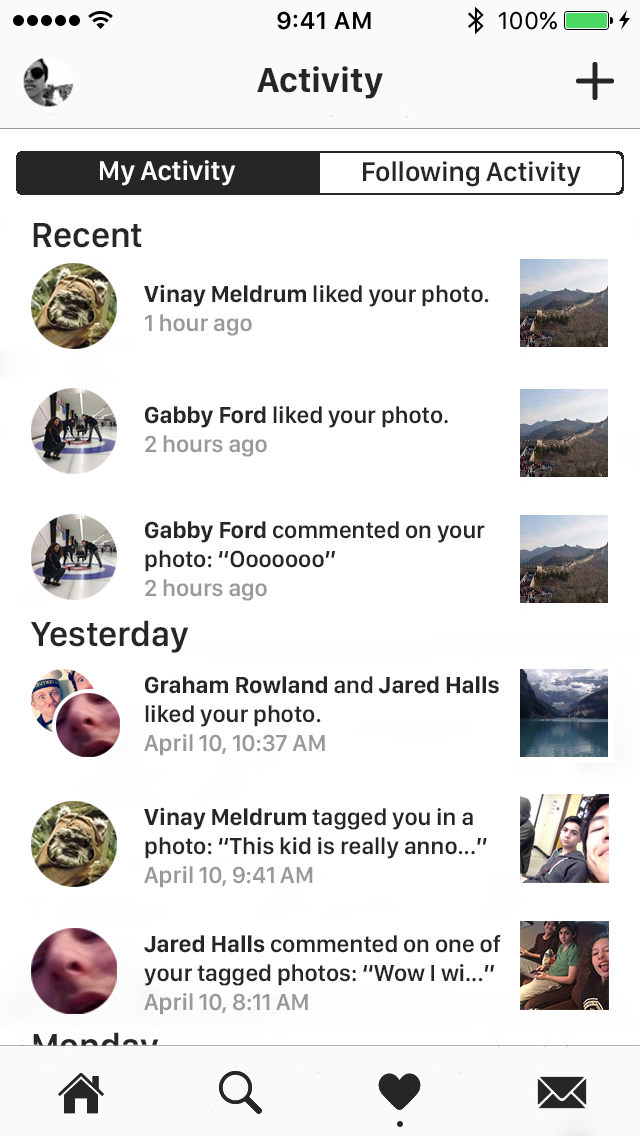
<style>
.page{position:relative;width:640px;height:1136px;background:#ffffff}
.page>*{position:absolute;margin:0}
.t1{font:36px "SanFranciscoDisplay-Bold";color:#262626}
.t2{font:28px "SanFranciscoDisplay-Semibold";color:#ffffff}
.t3{font:28px "SanFranciscoDisplay-Semibold";color:#262626}
.t4{font:36px "SanFranciscoDisplay-Semibold";color:#262626}
.t5{font:24px "SanFranciscoDisplay-Semibold";color:#262626}
.t6{font:24px "SanFranciscoDisplay-Bold";color:#262626}
.t7{font:24px "SanFranciscoDisplay-Semibold";color:#999999}
</style>
<div class="page">
<p class="t1" style="left:257px;top:66px;width:126px;height:33px">Activity</p>
<p class="t2" style="left:100px;top:160px;width:136px;height:26px">My Activity</p>
<p class="t3" style="left:363px;top:161px;width:218px;height:26px">Following Activity</p>
<p class="t4" style="left:33px;top:223px;width:109px;height:25px">Recent</p>
<p class="t5" style="left:144px;top:284px;width:345px;height:52px"><span class="t6">Vinay Meldrum</span> liked your photo.<br><span class="t7">1 hour ago</span></p>
<p class="t5" style="left:145px;top:406px;width:303px;height:51px"><span class="t6">Gabby Ford </span>liked your photo.<br><span class="t7">2 hours ago</span></p>
<p class="t5" style="left:145px;top:521px;width:340px;height:80px"><span class="t6">Gabby Ford </span>commented on your<br>photo: “Ooooooo”<br><span class="t7">2 hours ago</span></p>
<p class="t4" style="left:31px;top:620px;width:158px;height:33px">Yesterday</p>
<p class="t7" style="left:144px;top:676px;width:355px;height:80px"><span class="t6">Graham Rowland </span><span class="t5">and</span><span class="t6"> Jared Halls<br></span><span class="t5">liked your photo.<br></span>April 10, 10:37 AM</p>
<p class="t5" style="left:144px;top:807px;width:343px;height:81px"><span class="t6">Vinay Meldrum</span> tagged you in a<br>photo: “This kid is really anno...”<br><span class="t7">April 10, 9:41 AM</span></p>
<p class="t5" style="left:144px;top:935px;width:357px;height:80px"><span class="t6">Jared Halls </span>commented on one of<br>your tagged photos: “Wow I wi...”<br><span class="t7">April 10, 8:11 AM</span></p>
</div>
